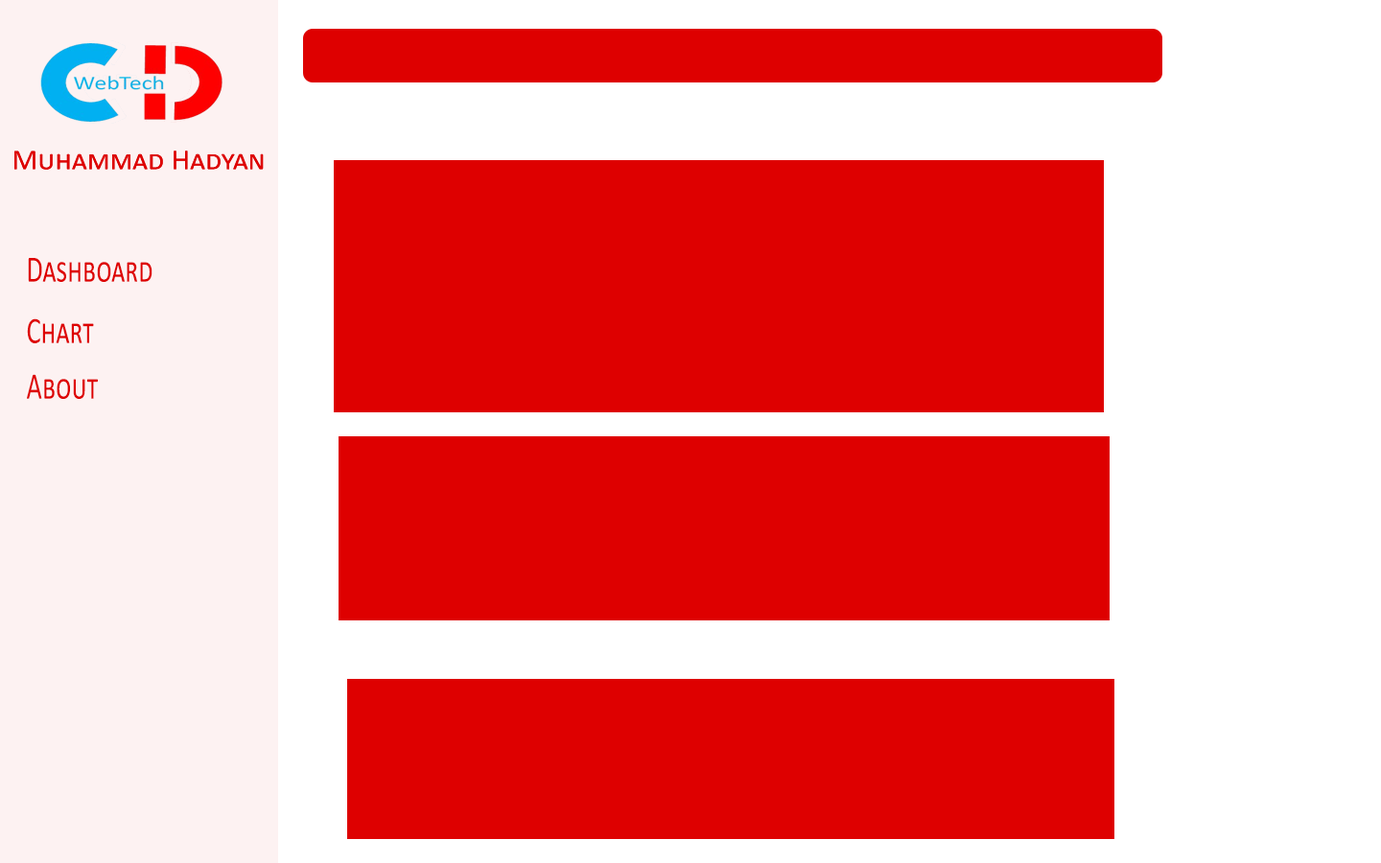
<style>
.page{position:relative;width:1381px;height:863px;background:#de0000}
.page>*{position:absolute;margin:0}
.t1{font:29px "Calibri";color:#de0000;font-variant:small-caps;scale:1.05 1}
.t2{font:37.7px "Calibri";color:#de0000;font-variant:small-caps;scale:0.72 1}
</style>
<div class="page">
<p class="t1" style="left:14px;top:151px;width:250px;height:19px">Muhammad Hadyan</p>
<p class="t1" style="left:14px;top:151px;width:250px;height:19px">Muhammad Hadyan</p>
<p class="t2" style="left:28px;top:258px;width:125px;height:24px">Dashboard</p>
<p class="t2" style="left:27px;top:318px;width:67px;height:25px">Chart</p>
<p class="t2" style="left:27px;top:374px;width:71px;height:25px">About</p>
</div>
